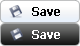
<style>
.page{position:relative;width:80px;height:46px}
.page>*{position:absolute;margin:0}
.t1{font:13px "Tahoma-Bold";color:#000000;scale:0.9 1}
.t2{font:13px "Tahoma-Bold";color:#ffffff;scale:0.9 1}
</style>
<div class="page">
<p class="t1" style="left:32px;top:7px;width:28px;height:9px">Save</p>
<p class="t2" style="left:32px;top:30px;width:28px;height:9px">Save</p>
</div>
